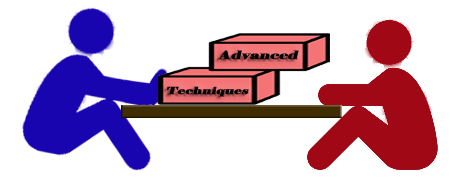
<style>
.page{position:relative;width:450px;height:187px;background:#ffffff}
.page>*{position:absolute;margin:0}
.t1{font:11.6px "Elephant-Regular";color:#000000;font-weight:bold;font-style:italic;scale:1.37 1}
.t2{font:9.9px "Elephant-Regular";color:#000000;font-weight:bold;font-style:italic;scale:1.37 1}
</style>
<div class="page">
<p class="t1" style="left:217px;top:50px;width:82px;height:10px">Advanced</p>
<p class="t2" style="left:166px;top:86px;width:83px;height:11px">Techniques</p>
</div>
